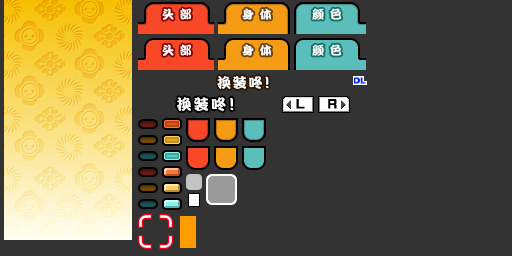
<style>
.page{position:relative;width:512px;height:256px;background:#333333}
.page>*{position:absolute;margin:0}
.t1{font:12px "DFPKanTingLiuW9";letter-spacing:0.075em;color:#ffffff}
.t2{font:14px "DFPKanTingLiuW9";letter-spacing:0.13em;color:#ffffff}
.t3{font:14px "DFPKanTingLiuW9";letter-spacing:-0.19em;color:#ffffff}
.t4{font:15px "DFPKanTingLiuW9";letter-spacing:0.15em;color:#ffffff}
.t5{font:15px "DFPKanTingLiuW9";letter-spacing:-0.11em;color:#ffffff}
</style>
<div class="page">
<p class="t1" style="left:162px;top:8px;width:29px;height:12px">头 部</p>
<p class="t1" style="left:242px;top:8px;width:30px;height:12px">身 体</p>
<p class="t1" style="left:312px;top:8px;width:30px;height:12px">颜 色</p>
<p class="t1" style="left:162px;top:44px;width:29px;height:12px">头 部</p>
<p class="t1" style="left:242px;top:44px;width:30px;height:12px">身 体</p>
<p class="t1" style="left:312px;top:44px;width:30px;height:12px">颜 色</p>
<p class="t2" style="left:217px;top:76px;width:52px;height:13px">换装<span class="t3">咚！</span></p>
<p class="t4" style="left:177px;top:97px;width:57px;height:14px">换装<span class="t5">咚！</span></p>
</div>
